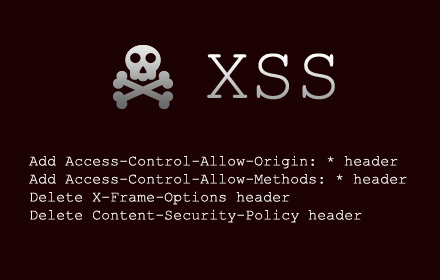
<style>
.page{position:relative;width:440px;height:280px;background:#1c0202}
.page>*{position:absolute;margin:0}
.t1{font:76.3px "CourierNewPSMT"}
.t2{font:15px "CourierNewPSMT";color:#ffffff}
</style>
<div class="page">
<p class="t1" style="left:207px;top:53px;width:128px;height:47px">XSS</p>
<p class="t2" style="left:29px;top:155px;width:378px;height:68px">Add Access-Control-Allow-Origin: * header<br>Add Access-Control-Allow-Methods: * header<br>Delete X-Frame-Options header<br>Delete Content-Security-Policy header</p>
</div>
